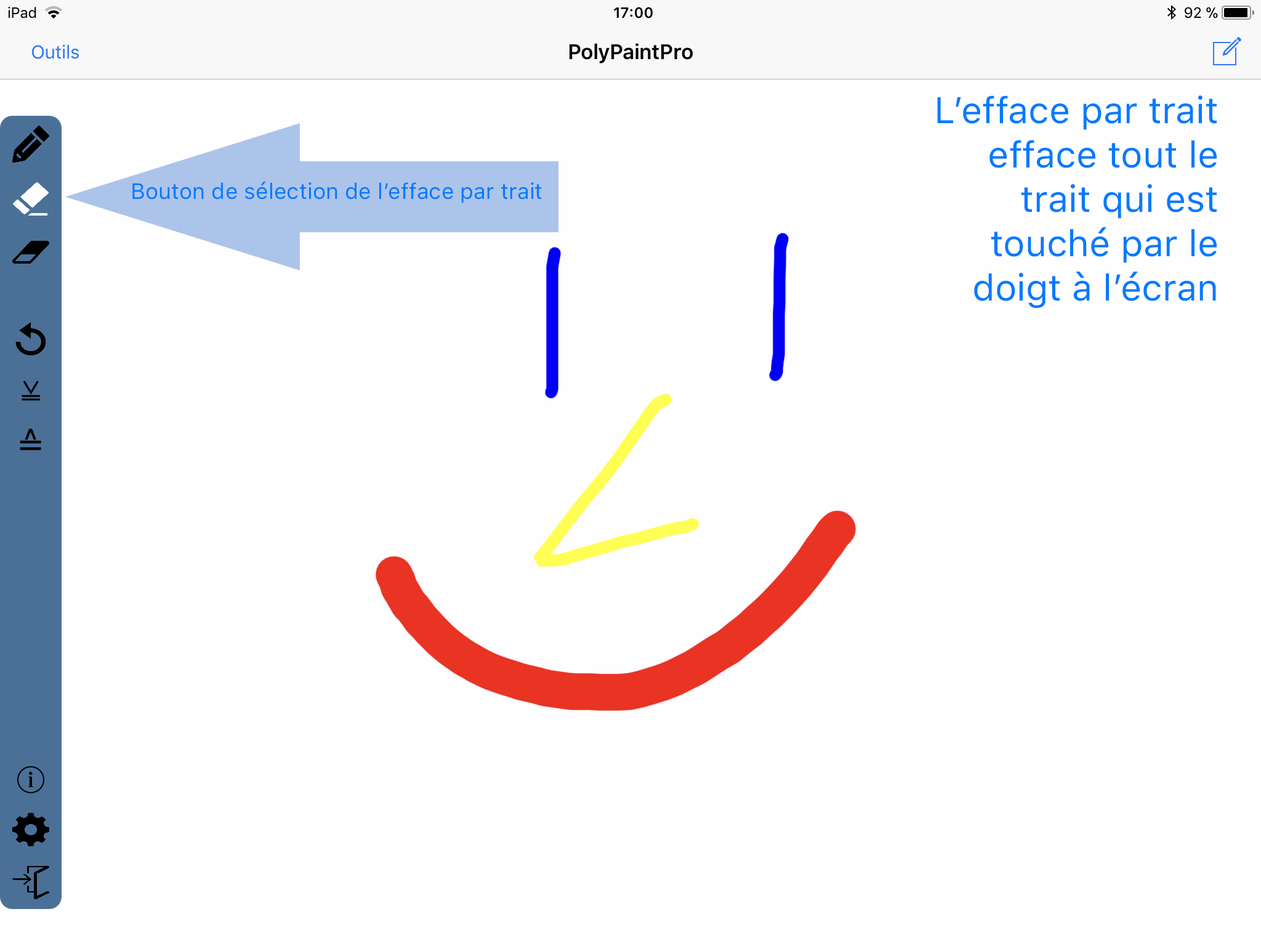
<style>
.page{position:relative;width:1261px;height:946px;background:#fffeff}
.page>*{position:absolute;margin:0}
.t1{font:36.9px "SFProText-Regular";color:#007aff}
.t2{font:22.2px "SFProText-Regular";color:#007aff}
</style>
<div class="page">
<p class="t1" style="left:937px;top:95px;width:280px;height:213px;text-align:right">L’efface par trait efface tout le trait qui est touché par le doigt à l’écran</p>
<p class="t2" style="left:132px;top:181px;width:410px;height:22px">Bouton de sélection de l’efface par trait</p>
</div>
